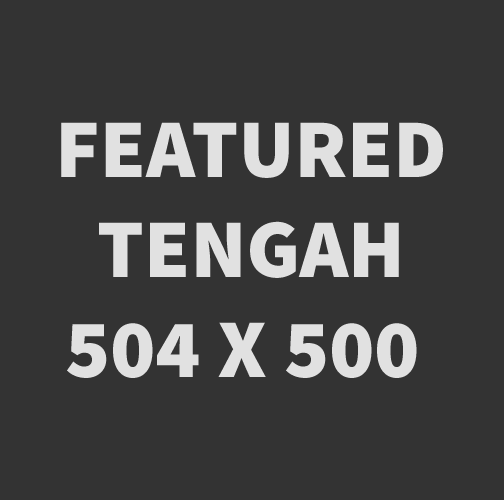
<style>
.page{position:relative;width:504px;height:500px;background:#333333}
.page>*{position:absolute;margin:0}
.t1{font:83.3px "SourceSansPro-Black";color:#e1e1e1}
</style>
<div class="page">
<p class="t1" style="left:61px;top:122px;width:382px;height:256px;text-align:center">FEATURED<br>TENGAH<br>504 X 500</p>
</div>
